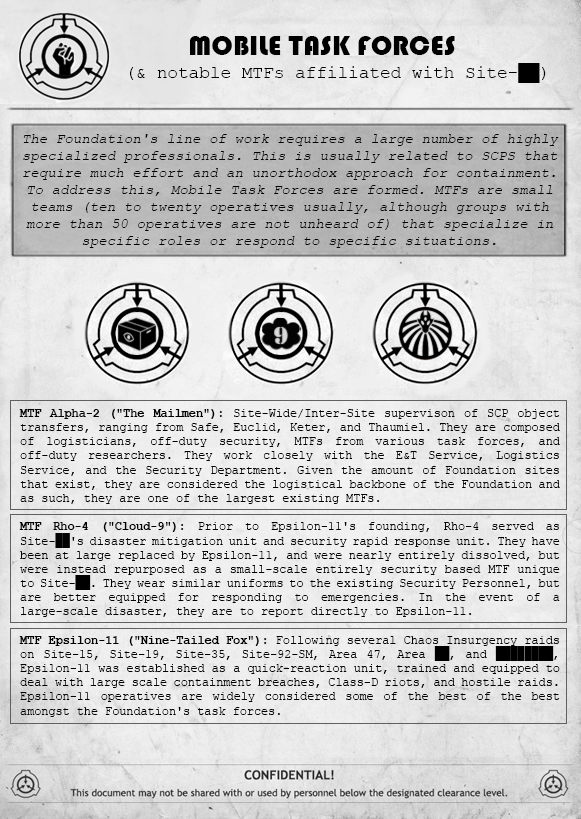
<style>
.page{position:relative;width:581px;height:819px}
.page>*{position:absolute;margin:0}
.t1{font:28.3px "Bauhaus93";color:#000000;text-transform:uppercase}
.t2{font:17.7px "CourierNewPSMT";color:#000000}
.t3{font:14.2px "CourierNewPSMT";color:#000000;font-style:italic}
.t4{font:14.2px "CourierNewPS-BoldMT";color:#000000;text-transform:uppercase}
.t5{font:11.8px "CourierNewPSMT";color:#000000}
.t6{font:11.8px "CourierNewPS-BoldMT";color:#000000}
</style>
<div class="page">
<p class="t1" style="left:190px;top:36px;width:265px;height:19px">Mobile Task Forces</p>
<p class="t2" style="left:130px;top:63px;width:416px;height:20px">(&amp; notable MTFs affiliated with Site-██)</p>
<p class="t3" style="left:23px;top:134px;width:536px;height:114px;text-align:center"><span class="t4"><br><br></span>The Foundation's line of work requires a large number of highly specialized professionals. This is usually related to SCPS that require much effort and an unorthodox approach for containment. To address this, Mobile Task Forces are formed. MTFs are small teams (ten to twenty operatives usually, although groups with more than 50 operatives are not unheard of) that specialize in specific roles or respond to specific situations.</p>
<p class="t5" style="left:19px;top:409px;width:541px;height:308px;text-align:justify"><span class="t6">MTF Alpha-2 ("The Mailmen"):</span> Site-Wide/Inter-Site supervison of SCP object transfers, ranging from Safe, Euclid, Keter, and Thaumiel. They are composed of logisticians, off-duty security, MTFs from various task forces, and off-duty researchers. They work closely with the E&amp;T Service, Logistics Service, and the Security Department. Given the amount of Foundation sites that exist, they are considered the logistical backbone of the Foundation and as such, they are one of the largest existing MTFs.<br><br><span class="t6">MTF Rho-4 ("Cloud-9"):</span> Prior to Epsilon-11's founding, Rho-4 served as Site-██'s disaster mitigation unit and security rapid response unit. They have been at large replaced by Epsilon-11, and were nearly entirely dissolved, but were instead repurposed as a small-scale entirely security based MTF unique to Site-██. They wear similar uniforms to the existing Security Personnel, but are better equipped for responding to emergencies. In the event of a large-scale disaster, they are to report directly to Epsilon-11. <br><br><span class="t6">MTF Epsilon-11 ("Nine-Tailed Fox"):</span> Following several Chaos Insurgency raids on Site-15, Site-19, Site-35, Site-92-SM, Area 47, Area ██, and ████████, Epsilon-11 was established as a quick-reaction unit, trained and equipped to deal with large scale containment breaches, Class-D riots, and hostile raids. Epsilon-11 operatives are widely considered some of the best of the best amongst the Foundation's task forces.</p>
</div>
